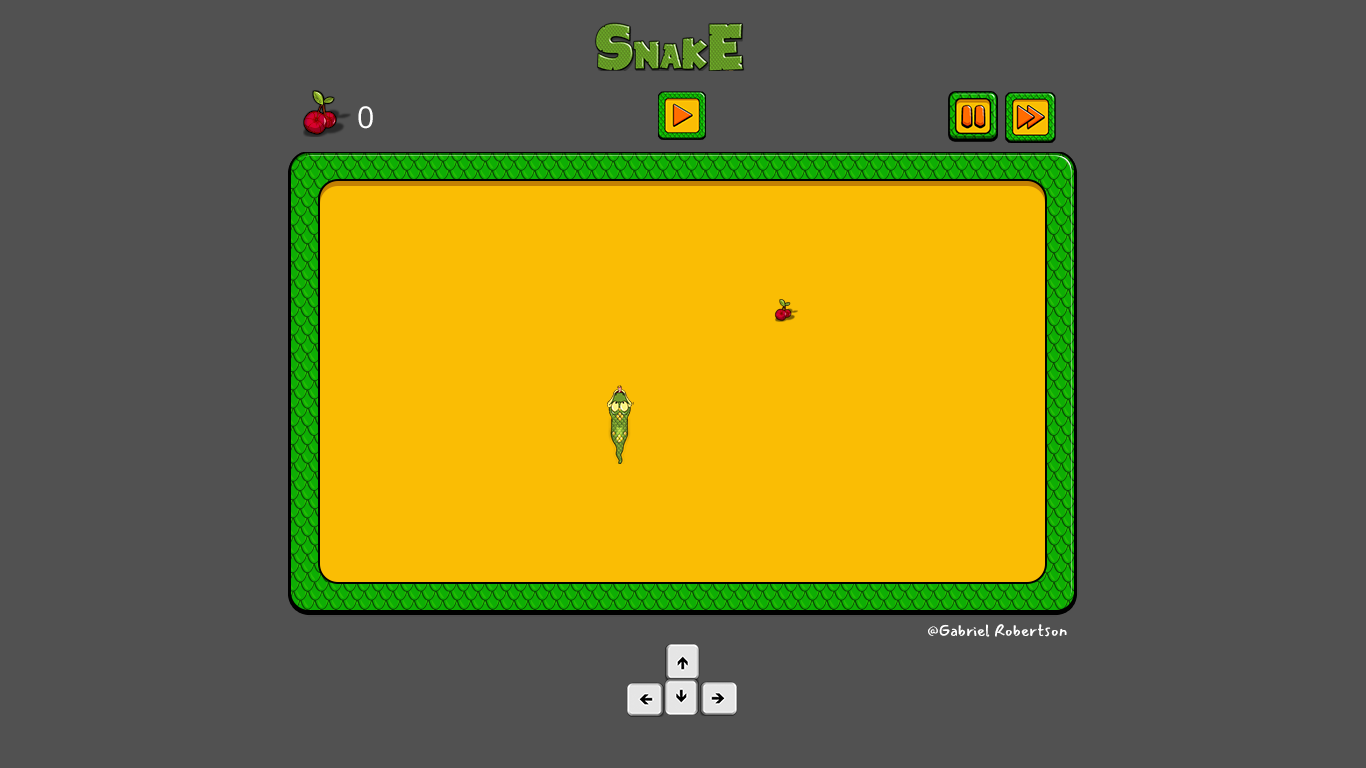
<style>
.page{position:relative;width:1366px;height:768px;background:#515151}
.page>*{position:absolute;margin:0}
.t1{font:30px "OpenSans";color:#ffffff}
.t2{font:16px "Mansalva-Regular";color:#ffffff}
</style>
<div class="page">
<p class="t1" style="left:358px;top:106px;width:15px;height:23px">0</p>
<p class="t2" style="left:928px;top:624px;width:139px;height:13px">@Gabriel Robertson</p>
</div>
